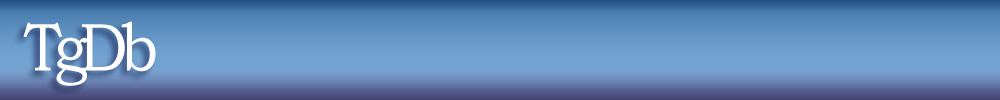
<style>
.page{position:relative;width:1000px;height:100px}
.page>*{position:absolute;margin:0}
.t1{font:68px "BookmanOldStyle";letter-spacing:-0.13em;color:#ffffff;scale:0.9 1}
</style>
<div class="page">
<p class="t1" style="left:23px;top:21px;width:133px;height:65px">TgDb</p>
</div>
